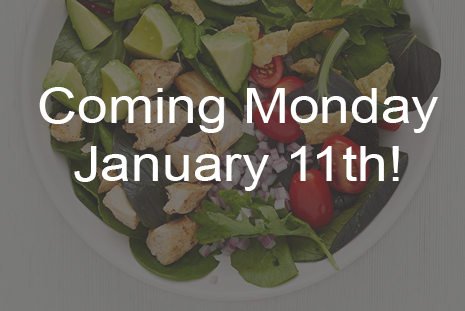
<style>
.page{position:relative;width:465px;height:311px}
.page>*{position:absolute;margin:0}
.t1{font:48px "ArialMT";color:#ffffff;scale:1.15 1}
</style>
<div class="page">
<p class="t1" style="left:39px;top:87px;width:399px;height:104px;text-align:center">Coming Monday<br>January 11th!</p>
</div>
